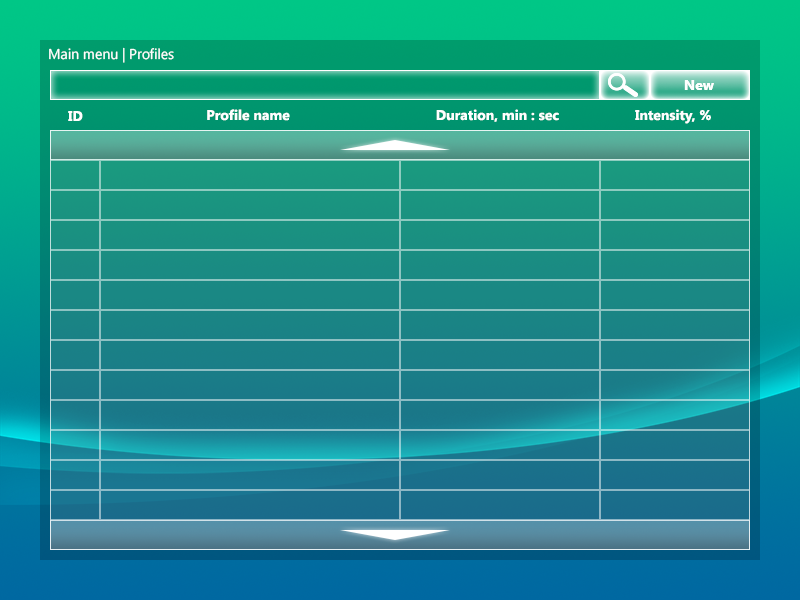
<style>
.page{position:relative;width:800px;height:600px}
.page>*{position:absolute;margin:0}
.t1{font:14.2px "SegoeUI";color:#ffffff}
.t2{font:14px "SegoeUI-Bold";color:#ffffff}
</style>
<div class="page">
<p class="t1" style="left:49px;top:47px;width:125px;height:16px">Main menu | Profiles</p>
<p class="t2" style="left:684px;top:80px;width:30px;height:10px">New</p>
<p class="t2" style="left:684px;top:80px;width:30px;height:10px">New</p>
<p class="t2" style="left:68px;top:111px;width:15px;height:10px">ID</p>
<p class="t2" style="left:207px;top:109px;width:83px;height:12px">Profile name</p>
<p class="t2" style="left:436px;top:109px;width:123px;height:13px">Duration, min : sec</p>
<p class="t2" style="left:635px;top:109px;width:76px;height:15px">Intensity, %</p>
</div>
